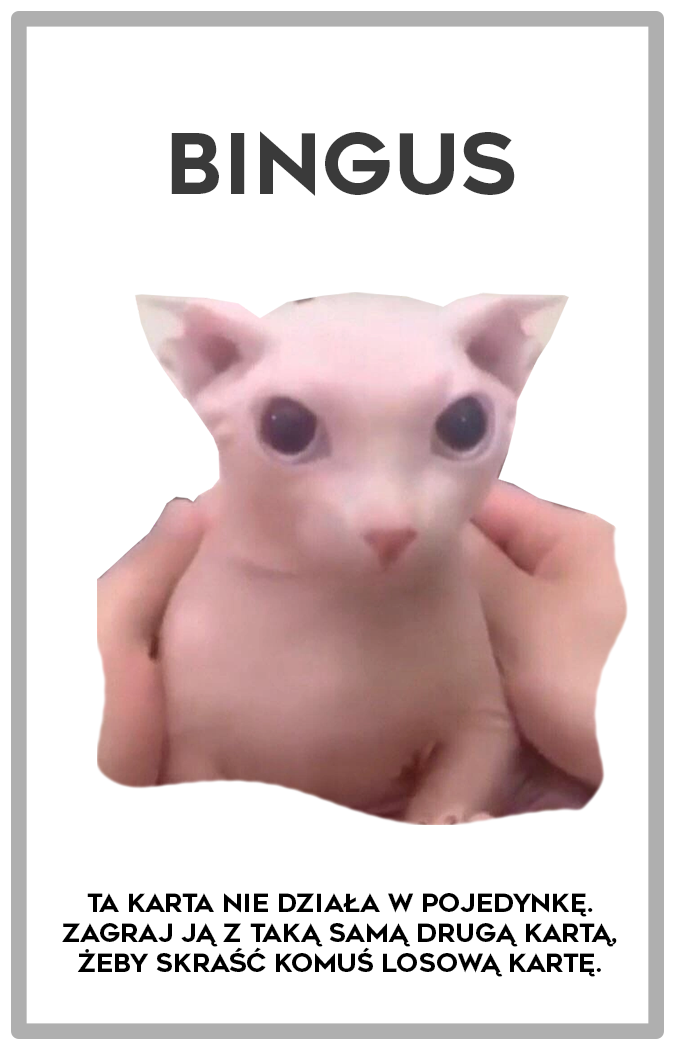
<style>
.page{position:relative;width:675px;height:1050px;background:#ffffff}
.page>*{position:absolute;margin:0}
.t1{font:83.3px "Renogare-Regular";color:#3a3a3a}
.t2{font:25px "Renogare-Regular";color:#000000}
</style>
<div class="page">
<p class="t1" style="left:171px;top:131px;width:344px;height:65px">BINGUS</p>
<p class="t2" style="left:62px;top:893px;width:555px;height:84px;text-align:center">TA KARTA NIE DZIAŁA W POJEDYNKĘ.<br>ZAGRAJ JĄ Z TAKĄ SAMĄ DRUGĄ KARTĄ,<br>ŻEBY SKRAŚĆ KOMUŚ LOSOWĄ KARTĘ.</p>
</div>
